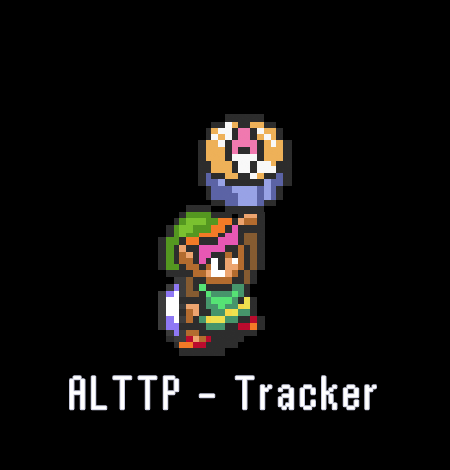
<style>
.page{position:relative;width:450px;height:470px;background:#000000}
.page>*{position:absolute;margin:0}
.t1{font:48.1px "ReturnOfGanonReg";color:#ffffff;scale:1.2 1}
</style>
<div class="page">
<p class="t1" style="left:70px;top:376px;width:306px;height:34px">ALTTP - Tracker</p>
</div>
